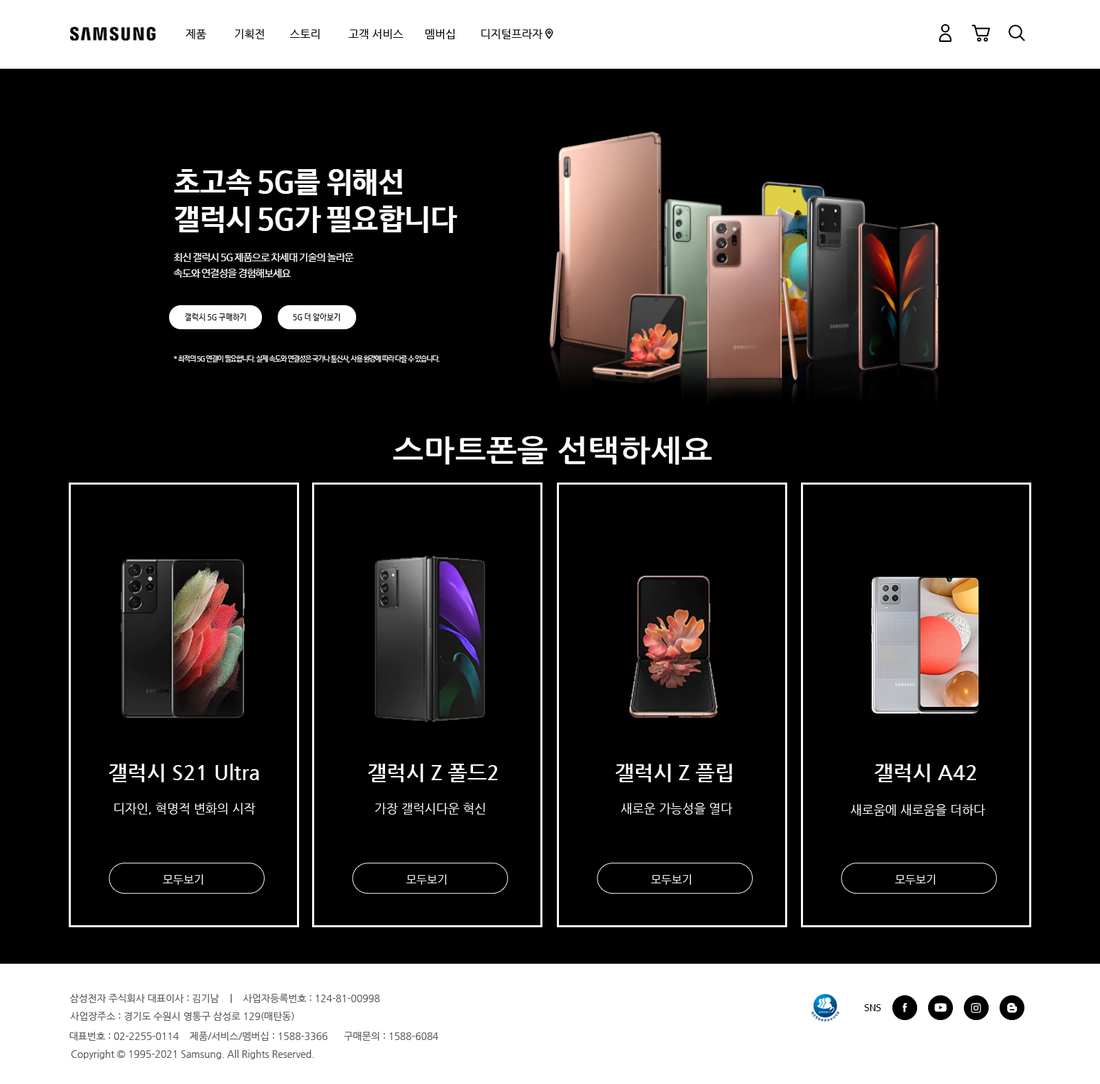
<style>
.page{position:relative;width:1100px;height:1084px;background:#000000}
.page>*{position:absolute;margin:0}
.t1{font:11px "NanumGothic";color:#000000}
.t2{font:29.7px "NanumGothicBold";color:#ffffff;scale:1.11 1}
.t3{font:20.6px "NanumGothicBold";color:#ffffff}
.t4{font:12.4px "NanumGothic";color:#ffffff}
.t5{font:11px "NanumGothic";color:#ffffff}
.t6{font:9.6px "NanumGothic";color:#555555}
</style>
<div class="page">
<p class="t1" style="left:186px;top:29px;width:356px;height:10px">제품         기획전        스토리         고객 서비스       멤버십        디지털프라자</p>
<p class="t2" style="left:393px;top:436px;width:319px;height:29px">스마트폰을 선택하세요</p>
<p class="t3" style="left:109px;top:764px;width:150px;height:18px">갤럭시 S21 Ultra</p>
<p class="t3" style="left:368px;top:764px;width:130px;height:18px">갤럭시 Z 폴드2</p>
<p class="t3" style="left:615px;top:764px;width:117px;height:18px">갤럭시 Z 플립</p>
<p class="t3" style="left:874px;top:764px;width:102px;height:18px">갤럭시 A42</p>
<p class="t4" style="left:114px;top:803px;width:142px;height:12px">디자인, 혁명적 변화의 시작</p>
<p class="t4" style="left:375px;top:803px;width:110px;height:12px">가장 갤럭시다운 혁신</p>
<p class="t4" style="left:621px;top:802px;width:111px;height:13px">새로운 가능성을 열다</p>
<p class="t4" style="left:850px;top:804px;width:135px;height:12px">새로움에 새로움을 더하다</p>
<p class="t5" style="left:163px;top:874px;width:40px;height:11px">모두보기</p>
<p class="t5" style="left:406px;top:874px;width:40px;height:11px">모두보기</p>
<p class="t5" style="left:651px;top:874px;width:40px;height:11px">모두보기</p>
<p class="t5" style="left:895px;top:874px;width:40px;height:11px">모두보기</p>
<p class="t6" style="left:70px;top:993px;width:310px;height:11px">삼성전자 주식회사 대표이사 : 김기남    |    사업자등록번호 : 124-81-00998</p>
<p class="t6" style="left:70px;top:1011px;width:224px;height:11px">사업장주소 : 경기도 수원시 영통구 삼성로 129(매탄동)</p>
<p class="t6" style="left:69px;top:1031px;width:370px;height:10px">대표번호 : 02-2255-0114    제품/서비스/멤버십 : 1588-3366      구매문의 : 1588-6084</p>
<p class="t6" style="left:71px;top:1050px;width:243px;height:9px">Copyright © 1995-2021 Samsung. All Rights Reserved.</p>
</div>
